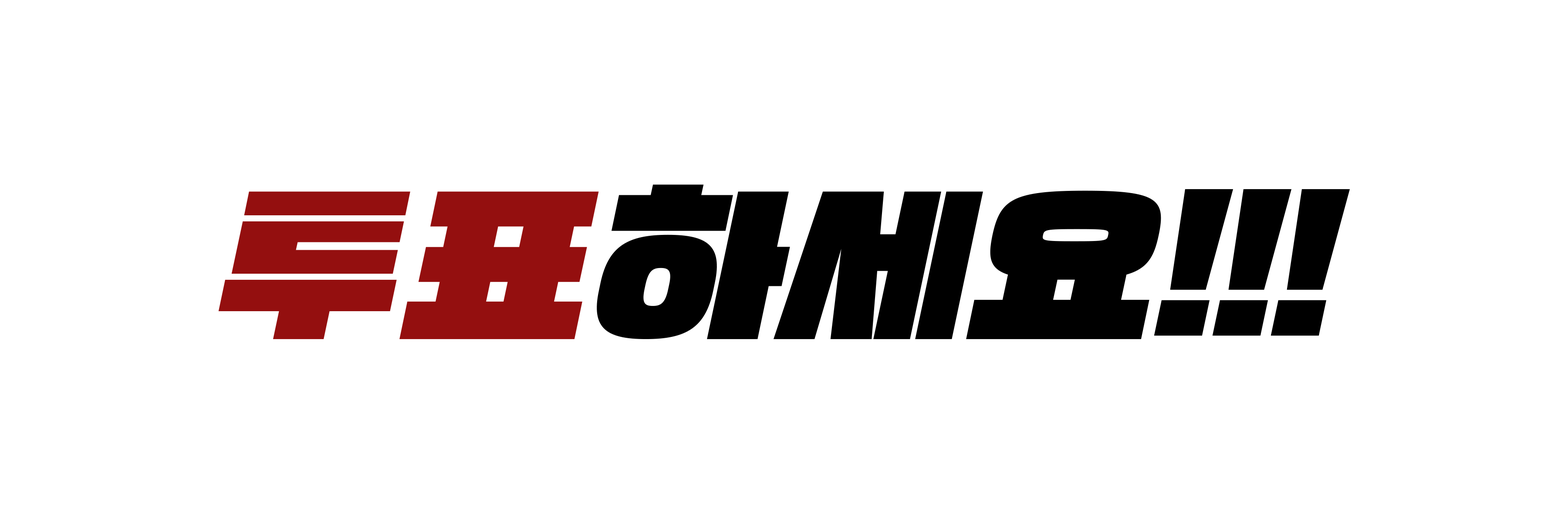
<style>
.page{position:relative;width:1568px;height:523px;background:#ffffff}
.page>*{position:absolute;margin:0}
.t1{font:174.2px "SDPress-aOriginal";color:#000000}
.t2{font:174.2px "SDPress-aOriginal";color:#940f0f}
</style>
<div class="page">
<p class="t1" style="left:218px;top:184px;width:1132px;height:155px"><span class="t2">투표</span>하세요!!!</p>
</div>
